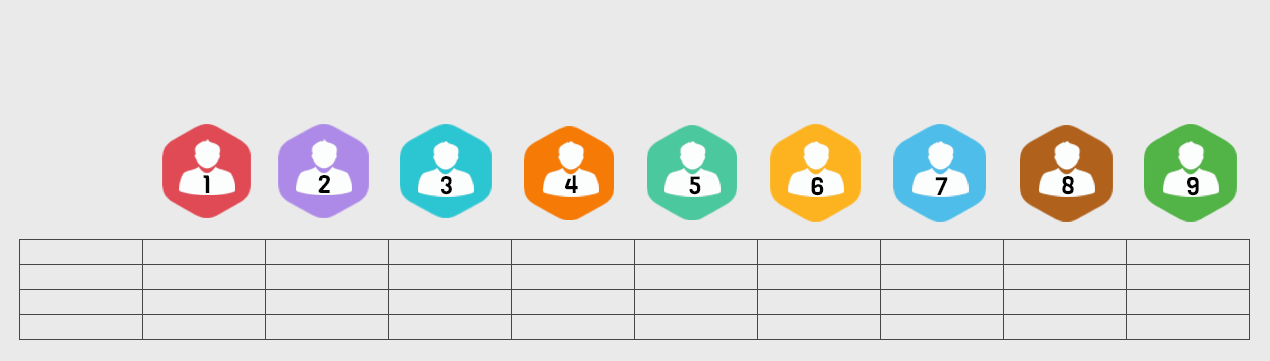
<style>
.page{position:relative;width:1270px;height:361px;background:#eaeaea}
.page>*{position:absolute;margin:0}
.t1{font:25px "Viga-Regular";color:#020100}
</style>
<div class="page">
<p class="t1" style="left:203px;top:175px;width:7px;height:18px">1</p>
<p class="t1" style="left:318px;top:175px;width:12px;height:18px">2</p>
<p class="t1" style="left:441px;top:176px;width:11px;height:19px">3</p>
<p class="t1" style="left:565px;top:175px;width:13px;height:18px">4</p>
<p class="t1" style="left:689px;top:176px;width:12px;height:19px">5</p>
<p class="t1" style="left:811px;top:177px;width:13px;height:19px">6</p>
<p class="t1" style="left:935px;top:177px;width:13px;height:18px">7</p>
<p class="t1" style="left:1062px;top:176px;width:12px;height:19px">8</p>
<p class="t1" style="left:1187px;top:177px;width:12px;height:19px">9</p>
</div>
